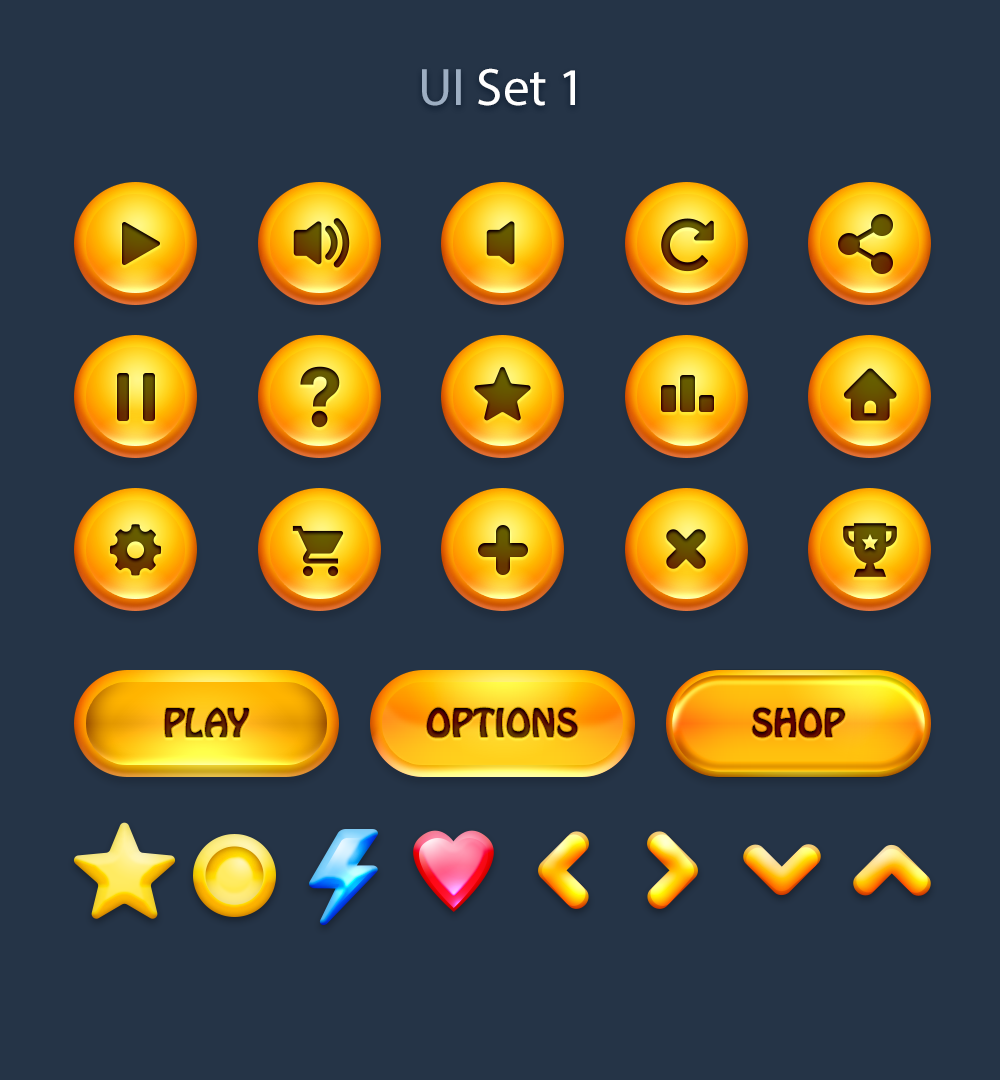
<style>
.page{position:relative;width:1000px;height:1080px;background:#253447}
.page>*{position:absolute;margin:0}
.t1{font:53px "MyriadPro-Regular";color:#ffffff}
.t2{font:53px "MyriadPro-Regular";color:#9daec2}
.t3{font:35px "HoboStd"}
.t4{font:35px "HoboStd";text-transform:uppercase}
.t5{font:35px "HoboStd";color:#500000;text-transform:uppercase}
</style>
<div class="page">
<p class="t1" style="left:422px;top:68px;width:153px;height:38px"><span class="t2">UI </span>Set 1</p>
<p class="t3" style="left:164px;top:707px;width:85px;height:30px">PLAY</p>
<p class="t4" style="left:426px;top:707px;width:152px;height:31px">Options</p>
<p class="t5" style="left:752px;top:707px;width:93px;height:31px">Shop</p>
</div>
